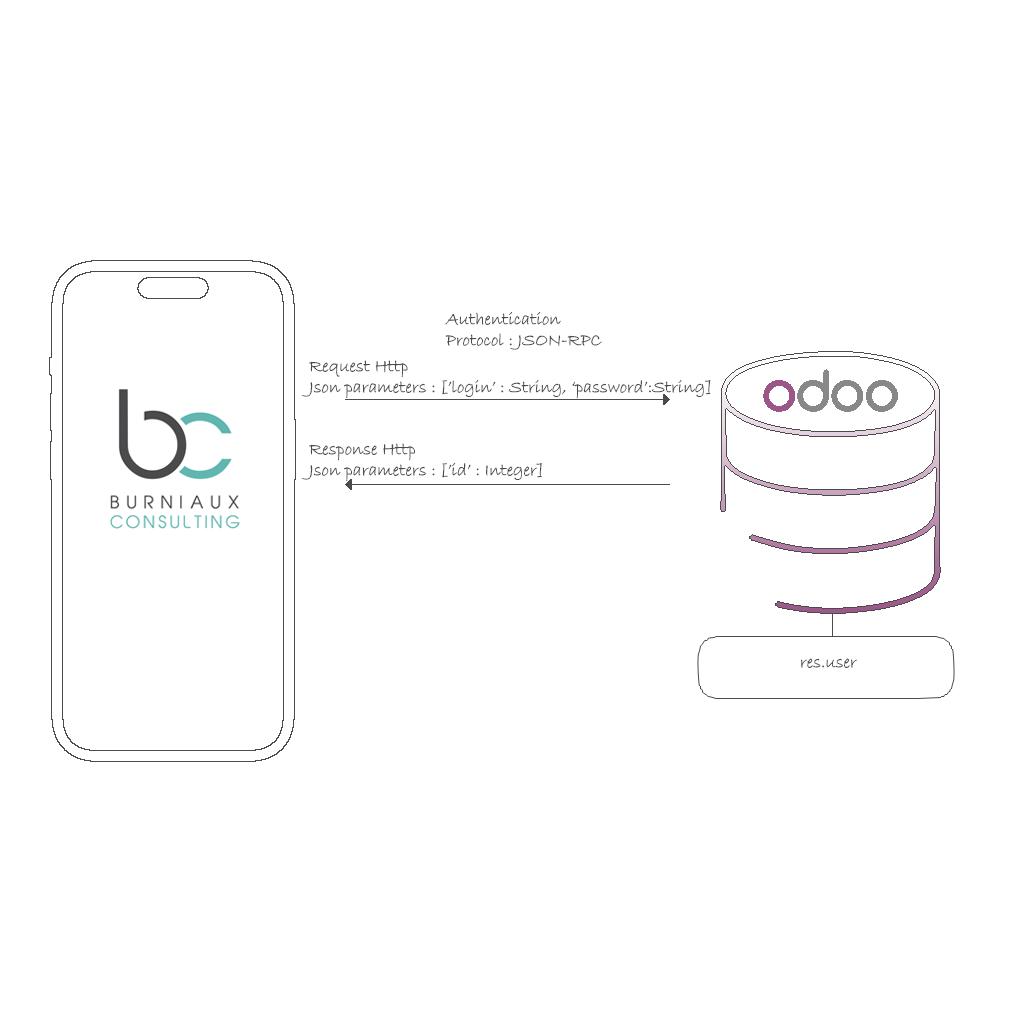
<style>
.page{position:relative;width:1024px;height:1024px;background:#ffffff}
.page>*{position:absolute;margin:0}
.t1{font:18px "BradleyHandITC";color:#4b4b4b}
</style>
<div class="page">
<p class="t1" style="left:445px;top:311px;width:157px;height:39px">Authentication<br>Protocol : JSON-RPC</p>
<p class="t1" style="left:301px;top:360px;width:410px;height:39px">Request Http<br>Json parameters : [’login’ : String, ‘password’:String]</p>
<p class="t1" style="left:301px;top:443px;width:242px;height:39px">Response Http<br>Json parameters : [’id’ : Integer]</p>
<p class="t1" style="left:801px;top:658px;width:57px;height:10px">res.user</p>
</div>
